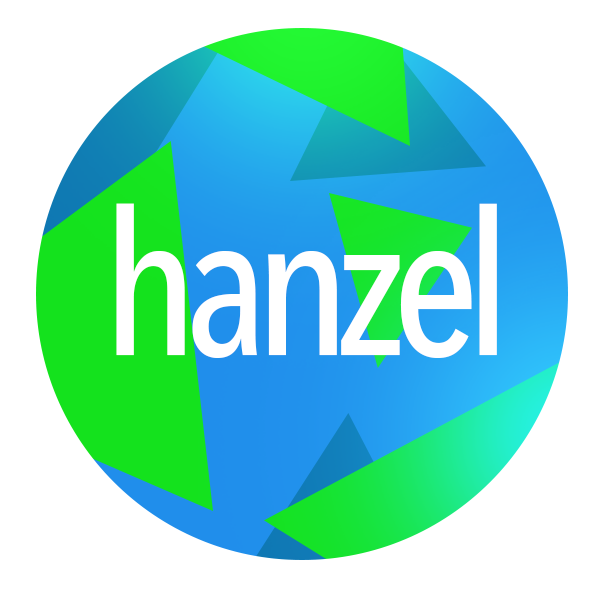
<style>
.page{position:relative;width:600px;height:600px;background:#ffffff}
.page>*{position:absolute;margin:0}
.t1{font:200px "AvenirNextCondensed-Medium";letter-spacing:-0.07em;color:#ffffff}
</style>
<div class="page">
<p class="t1" style="left:116px;top:203px;width:381px;height:155px">hanzel</p>
</div>
